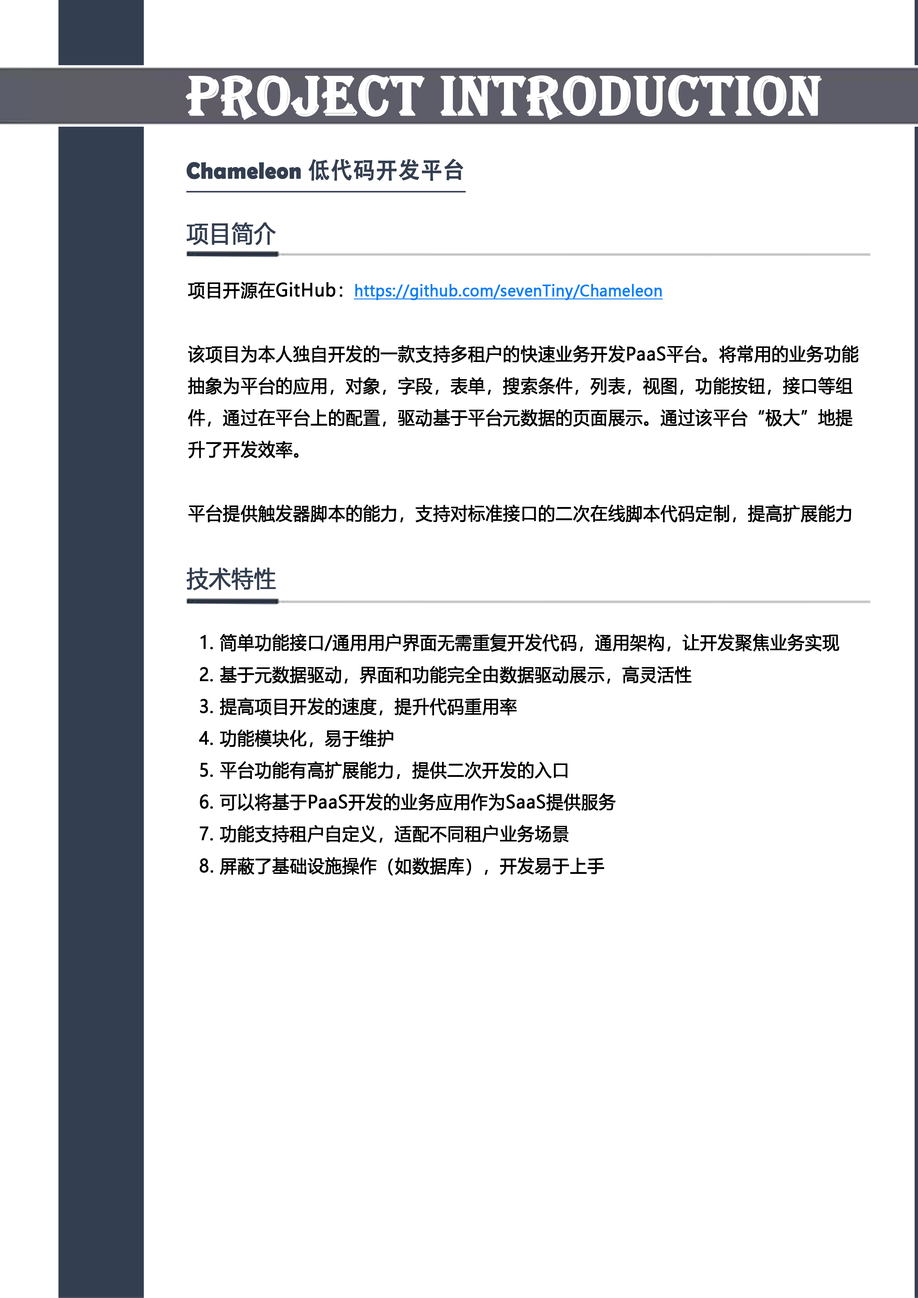
<style>
.page{position:relative;width:918px;height:1298px;background:#ffffff}
.page>*{position:absolute;margin:0}
.t1{font:57.4px "Algerian";letter-spacing:0.005em;color:#ffffff;font-weight:bold;scale:0.95 1}
.t2{font:23px "BerlinSansFBDemi-Bold";letter-spacing:0.005em;color:#333e50;font-weight:bold;scale:0.95 1}
.t3{font:23px "AdobeHeitiStd-Regular";letter-spacing:0.005em;color:#333e50;font-weight:bold;scale:0.95 1}
.t4{font:23px "MicrosoftYaHei";letter-spacing:0.005em;color:#333e50;font-weight:bold;scale:0.95 1}
.t5{font:17.9px/31.9px "MicrosoftYaHei";letter-spacing:0.005em;color:#000000;font-weight:bold;scale:0.95 1}
.t6{font:15.3px/28.1px "MicrosoftYaHei";letter-spacing:0.005em;color:#087ff9;font-weight:bold;text-decoration:underline;scale:0.95 1}
</style>
<div class="page">
<p class="t1" style="left:185px;top:75px;width:637px;height:45px">PROJECT INTRODUCTION</p>
<p class="t2" style="left:186px;top:159px;width:277px;height:22px">Chameleon <span class="t3">低代码开发平台</span></p>
<p class="t4" style="left:186px;top:223px;width:90px;height:22px">项目简介</p>
<p class="t5" style="left:188px;top:282px;width:671px;height:241px">项目开源在GitHub：<span class="t6">https://github.com/sevenTiny/Chameleon<br></span><br>该项目为本人独自开发的一款支持多租户的快速业务开发PaaS平台。将常用的业务功能抽象为平台的应用，对象，字段，表单，搜索条件，列表，视图，功能按钮，接口等组件，通过在平台上的配置，驱动基于平台元数据的页面展示。通过该平台“极大”地提升了开发效率。<br><br>平台提供触发器脚本的能力，支持对标准接口的二次在线脚本代码定制，提高扩展能力。</p>
<p class="t4" style="left:186px;top:568px;width:90px;height:22px">技术特性</p>
<p class="t5" style="left:199px;top:634px;width:641px;height:242px">1. 简单功能接口/通用用户界面无需重复开发代码，通用架构，让开发聚焦业务实现<br> 2. 基于元数据驱动，界面和功能完全由数据驱动展示，高灵活性<br> 3. 提高项目开发的速度，提升代码重用率<br> 4. 功能模块化，易于维护<br> 5. 平台功能有高扩展能力，提供二次开发的入口<br> 6. 可以将基于PaaS开发的业务应用作为SaaS提供服务<br> 7. 功能支持租户自定义，适配不同租户业务场景<br>  8. 屏蔽了基础设施操作（如数据库），开发易于上手</p>
</div>
